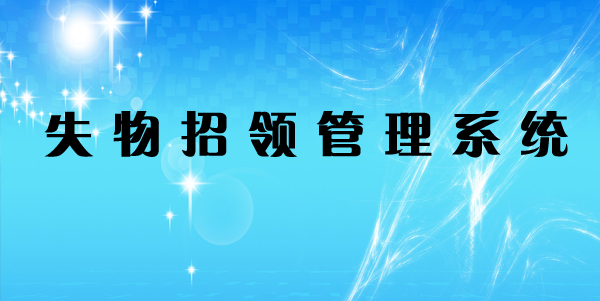
<style>
.page{position:relative;width:600px;height:301px}
.page>*{position:absolute;margin:0}
.t1{font:48px "FZCQJW--GB1-0";letter-spacing:0.39em;color:#000000;font-weight:bold}
</style>
<div class="page">
<p class="t1" style="left:44px;top:111px;width:524px;height:47px">失物招领管理系统</p>
</div>
